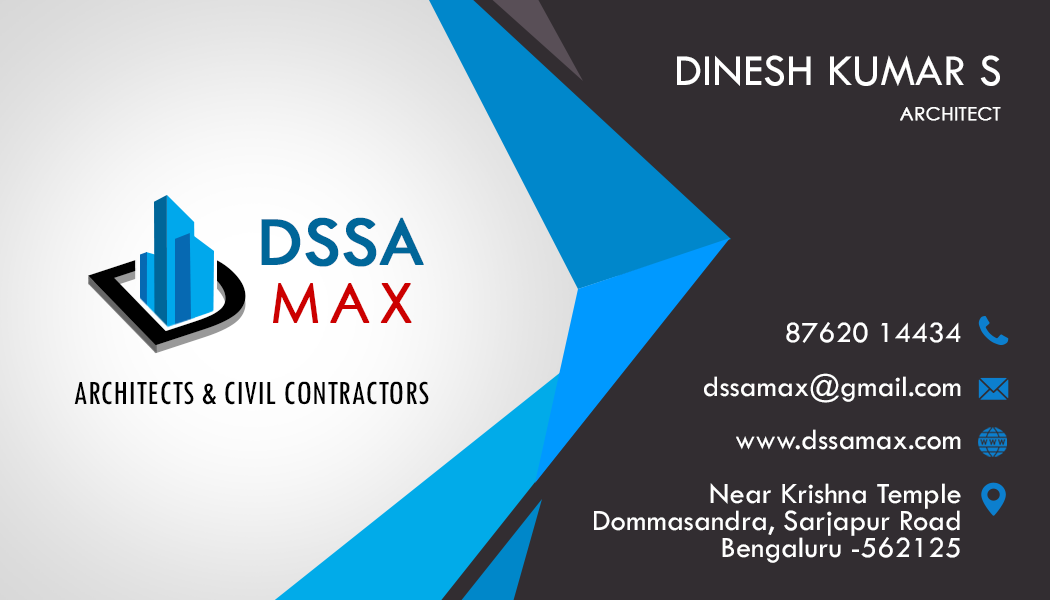
<style>
.page{position:relative;width:1050px;height:600px;background:#322d31}
.page>*{position:absolute;margin:0}
.t1{font:45.8px "TwCenMT-Regular";color:#ffffff;text-transform:uppercase}
.t2{font:18.3px "CenturyGothic";color:#ffffff;text-transform:uppercase;font-weight:bold}
.t3{font:72.1px "TwCenMT-Regular";color:#006699;font-weight:bold}
.t4{font:135.6px "ArialMT";color:#000000;scale:1.48 1}
.t5{font:135.6px "ArialMT";scale:1.48 1}
.t6{font:53.5px "CenturyGothic";letter-spacing:0.16em;color:#cc0000;text-transform:uppercase;font-weight:bold}
.t7{font:30.6px/26.8px "TwCenMT-Regular";color:#ffffff}
.t8{font:35.3px "TwCenMT-Condensed";color:#000000;text-transform:uppercase}
</style>
<div class="page">
<p class="t1" style="left:677px;top:55px;width:323px;height:31px">Dinesh kumar S</p>
<p class="t2" style="left:900px;top:107px;width:101px;height:14px">ARCHITECT</p>
<p class="t3" style="left:261px;top:217px;width:163px;height:50px">DSSA</p>
<p class="t4" style="left:88px;top:251px;width:158px;height:95px;rotate:-18deg">D</p>
<p class="t5" style="left:88px;top:259px;width:158px;height:95px;rotate:-18deg">D</p>
<p class="t6" style="left:273px;top:283px;width:139px;height:40px">max</p>
<p class="t7" style="left:594px;top:322px;width:367px;height:241px;text-align:right">87620 14434<br>   <br>dssamax@gmail.com<br>   <br>www.dssamax.com<br>   <br>Near Krishna Temple <br>Dommasandra, Sarjapur Road<br>Bengaluru -562125</p>
<p class="t8" style="left:74px;top:381px;width:355px;height:24px">ArchitecTS &amp; Civil Contractors</p>
</div>
